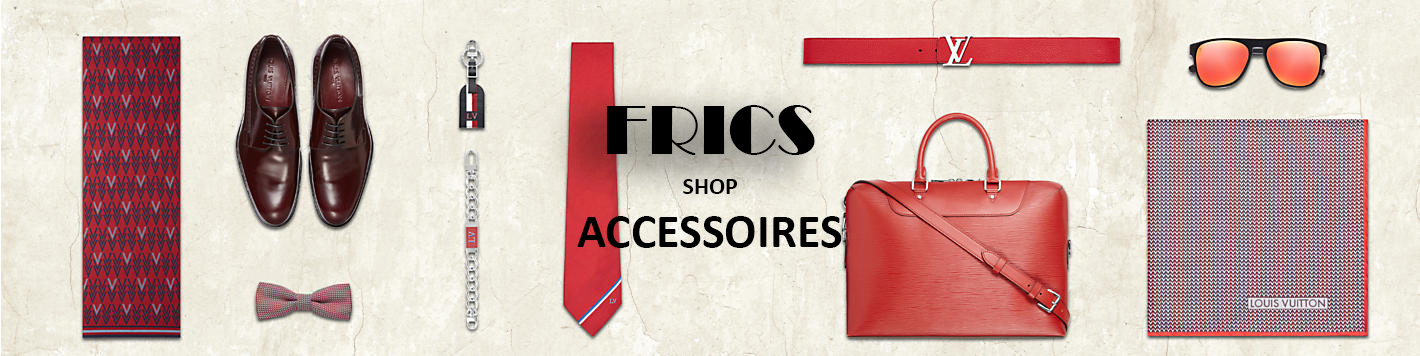
<style>
.page{position:relative;width:1420px;height:356px}
.page>*{position:absolute;margin:0}
.t1{font:71.8px "Broadway";color:#000000;scale:0.95 1}
.t2{font:24px "Calibri-Bold";color:#000000}
.t3{font:48px "Calibri-Bold";color:#000000}
</style>
<div class="page">
<p class="t1" style="left:606px;top:105px;width:209px;height:50px">FRICS</p>
<p class="t2" style="left:683px;top:179px;width:54px;height:15px">SHOP</p>
<p class="t3" style="left:577px;top:216px;width:265px;height:32px">ACCESSOIRES</p>
</div>
